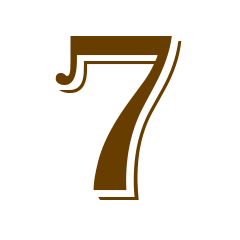
<style>
.page{position:relative;width:240px;height:240px;background:#ffffff}
.page>*{position:absolute;margin:0}
.t1{font:250px "Algerian";color:#683e00}
</style>
<div class="page">
<p class="t1" style="left:55px;top:36px;width:127px;height:164px">7</p>
</div>
